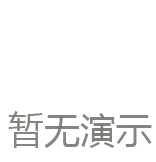
<style>
.page{position:relative;width:156px;height:162px;background:#ffffff}
.page>*{position:absolute;margin:0}
.t1{font:36px "MicrosoftYaHei";color:#6e6e6e}
</style>
<div class="page">
<p class="t1" style="left:8px;top:111px;width:144px;height:37px">暂无演示</p>
</div>
